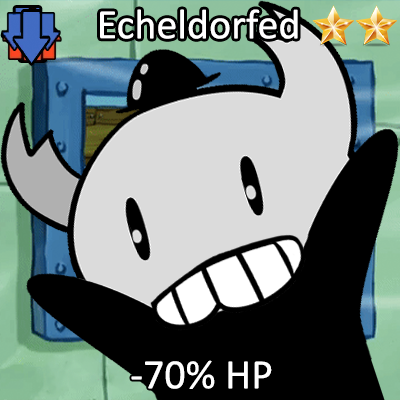
<style>
.page{position:relative;width:400px;height:400px;background:#000000}
.page>*{position:absolute;margin:0}
.t1{font:72px "Calibri";color:#ffffff}
</style>
<div class="page">
<p class="t1" style="left:100px;top:9px;width:198px;height:30px">Echeldorfed</p>
<p class="t1" style="left:131px;top:360px;width:141px;height:29px">-70% HP</p>
</div>
